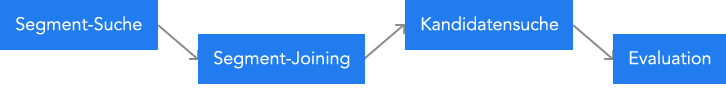
<style>
.page{position:relative;width:726px;height:98px;background:#ffffff}
.page>*{position:absolute;margin:0}
.t1{font:18px "Avenir-Book";color:#ffffff}
</style>
<div class="page">
<p class="t1" style="left:16px;top:16px;width:126px;height:19px">Segment-Suche</p>
<p class="t1" style="left:421px;top:16px;width:138px;height:15px">Kandidatensuche</p>
<p class="t1" style="left:214px;top:50px;width:136px;height:19px">Segment-Joining</p>
<p class="t1" style="left:629px;top:50px;width:82px;height:15px">Evaluation</p>
</div>
